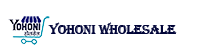
<style>
.page{position:relative;width:200px;height:56px;background:#ffffff}
.page>*{position:absolute;margin:0}
.t1{font:13.5px "Algerian";color:#010538}
</style>
<div class="page">
<p class="t1" style="left:48px;top:22px;width:129px;height:12px">YOHONI WHOLESALE</p>
</div>
